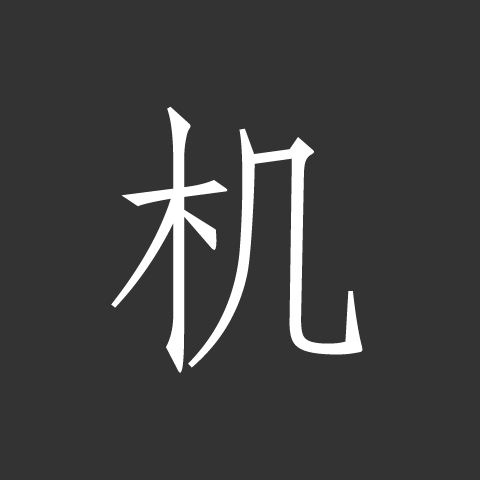
<style>
.page{position:relative;width:480px;height:480px;background:#333333}
.page>*{position:absolute;margin:0}
.t1{font:288px "STFangsong";color:#ffffff}
</style>
<div class="page">
<p class="t1" style="left:111px;top:106px;width:252px;height:267px">机</p>
</div>
